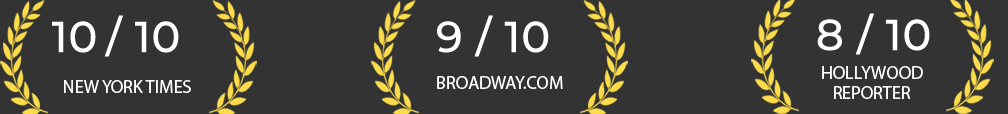
<style>
.page{position:relative;width:1008px;height:114px;background:#333333}
.page>*{position:absolute;margin:0}
.t1{font:18px "MyriadPro-Regular";color:#ffffff}
.t2{font:18px/20px "MyriadPro-Regular";color:#ffffff}
</style>
<div class="page">
<p class="t1" style="left:437px;top:76px;width:126px;height:13px">BROADWAY.COM</p>
<p class="t2" style="left:822px;top:66px;width:101px;height:33px">HOLLYWOOD <br>   REPORTER</p>
<p class="t1" style="left:64px;top:80px;width:127px;height:13px">NEW YORK TIMES</p>
</div>
